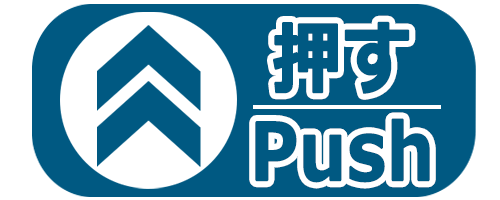
<style>
.page{position:relative;width:500px;height:200px;background:#005982}
.page>*{position:absolute;margin:0}
.t1{font:78.4px/92px "Meiryo-Bold";color:#005982;font-weight:bold;scale:0.87 1}
</style>
<div class="page">
<p class="t1" style="left:255px;top:21px;width:175px;height:162px;text-align:center">押す<br>Push</p>
</div>
